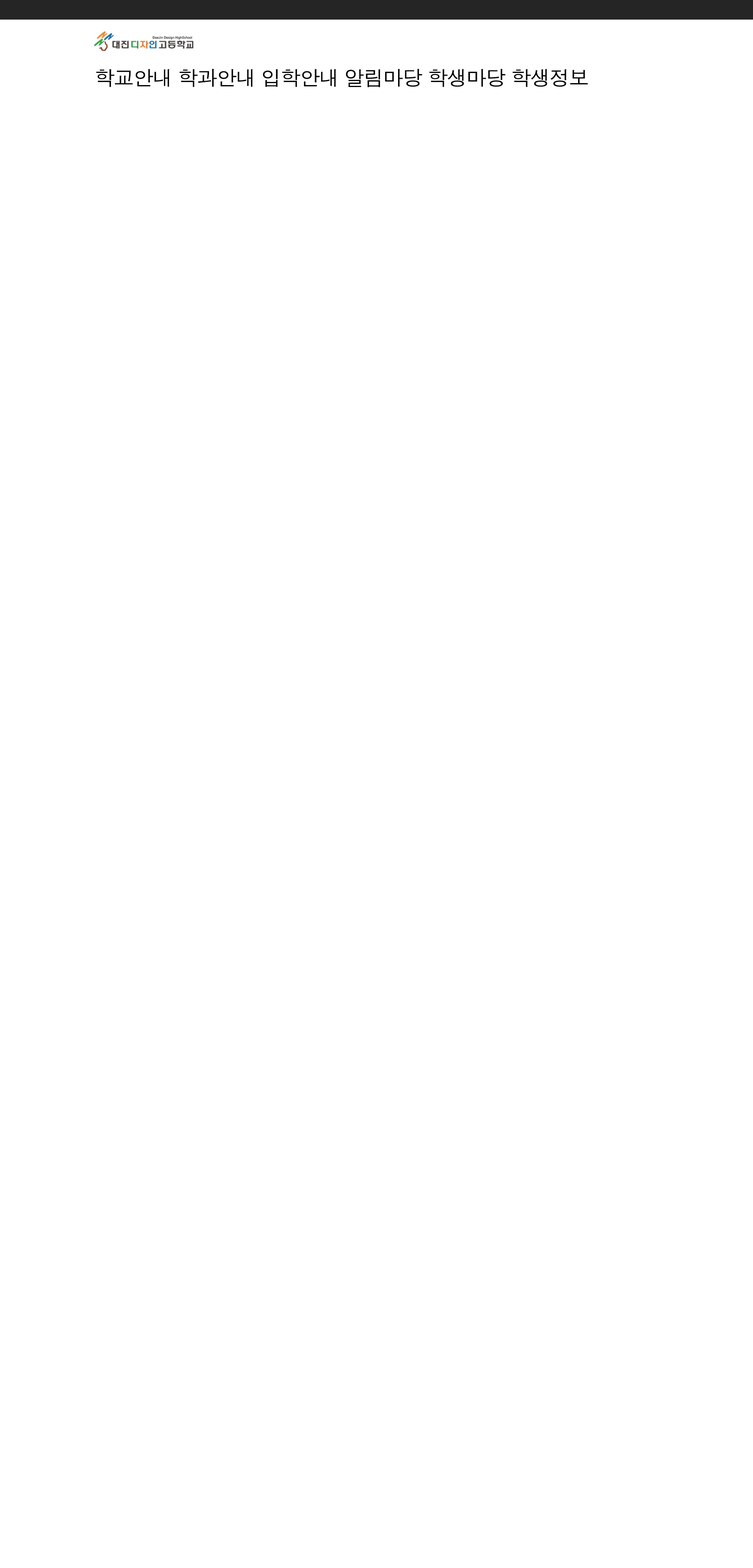
<style>
.page{position:relative;width:753px;height:1568px;background:#ffffff}
.page>*{position:absolute;margin:0}
.t1{font:20.4px "Haansoft-Dotum";letter-spacing:-0.05em;color:#000000}
</style>
<div class="page">
<p class="t1" style="left:96px;top:69px;width:492px;height:18px">학교안내 학과안내 입학안내 알림마당 학생마당 학생정보</p>
</div>
